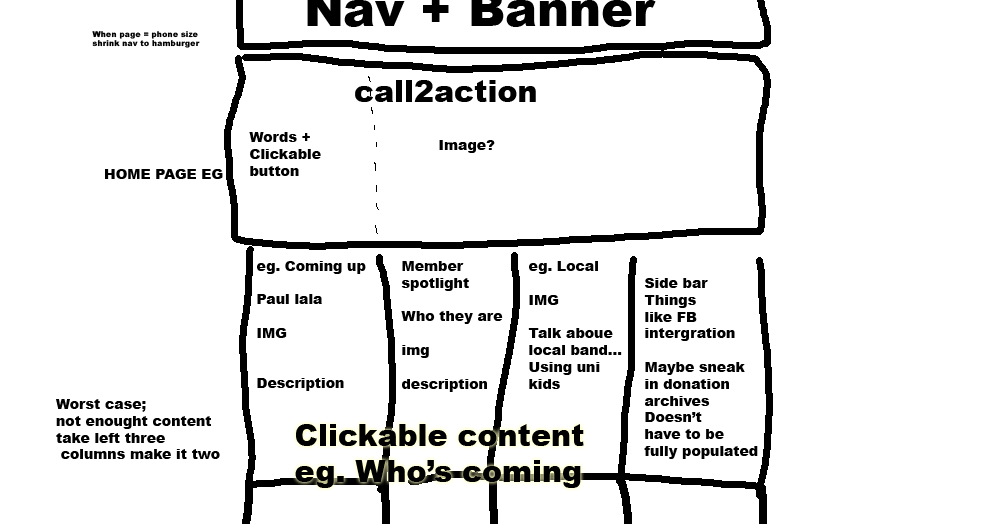
<style>
.page{position:relative;width:1005px;height:524px;background:#ffffff}
.page>*{position:absolute;margin:0}
.t1{font:8px "Arial-Black";color:#000000}
.t2{font:30px "Arial-Black";color:#000000}
.t3{font:14px "Arial-Black";color:#000000}
</style>
<div class="page">
<p class="t1" style="left:92px;top:31px;width:108px;height:17px">When page = phone size<br>shrink nav to hamburger</p>
<p class="t2" style="left:355px;top:80px;width:181px;height:22px">call2action</p>
<p class="t3" style="left:249px;top:132px;width:72px;height:44px">Words + <br>Clickable <br>button</p>
<p class="t3" style="left:439px;top:140px;width:56px;height:13px">Image?</p>
<p class="t3" style="left:105px;top:169px;width:118px;height:10px">HOME PAGE EG</p>
<p class="t3" style="left:257px;top:261px;width:109px;height:130px">eg. Coming up<br><br>Paul lala<br><br>IMG<br><br><br>Description</p>
<p class="t3" style="left:401px;top:261px;width:102px;height:131px">Member<br>spotlight<br><br>Who they are<br><br>img<br><br>description</p>
<p class="t3" style="left:528px;top:261px;width:94px;height:128px">eg. Local<br><br>IMG<br><br>Talk aboue <br>local band...<br>Using uni<br>kids</p>
<p class="t3" style="left:644px;top:278px;width:114px;height:181px">Side bar<br>Things <br>like FB<br>intergration<br><br>Maybe sneak<br>in donation<br>archives<br>Doesn’t<br>have to be <br>fully populated</p>
<p class="t3" style="left:56px;top:399px;width:164px;height:60px">Worst case;<br>not enought content<br>take left three<br> columns make it two</p>
<p class="t2" style="left:295px;top:424px;width:289px;height:64px">Clickable content<br>eg. Who’s coming</p>
</div>
